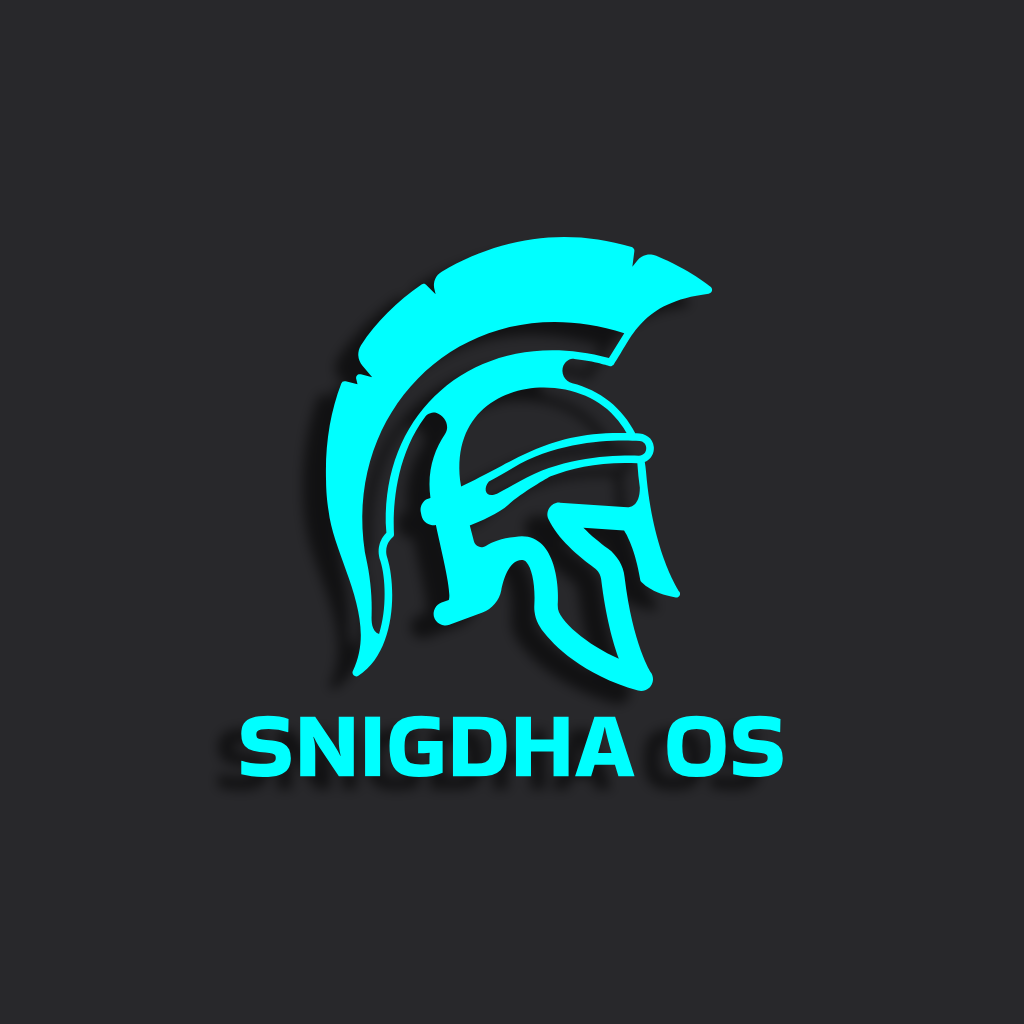
<style>
.page{position:relative;width:1024px;height:1024px;background:#28282b}
.page>*{position:absolute;margin:0}
.t1{font:94px "BakbakOne-Regular";color:#00ffff}
</style>
<div class="page">
<p class="t1" style="left:241px;top:715px;width:542px;height:62px">SNIGDHA OS</p>
</div>
